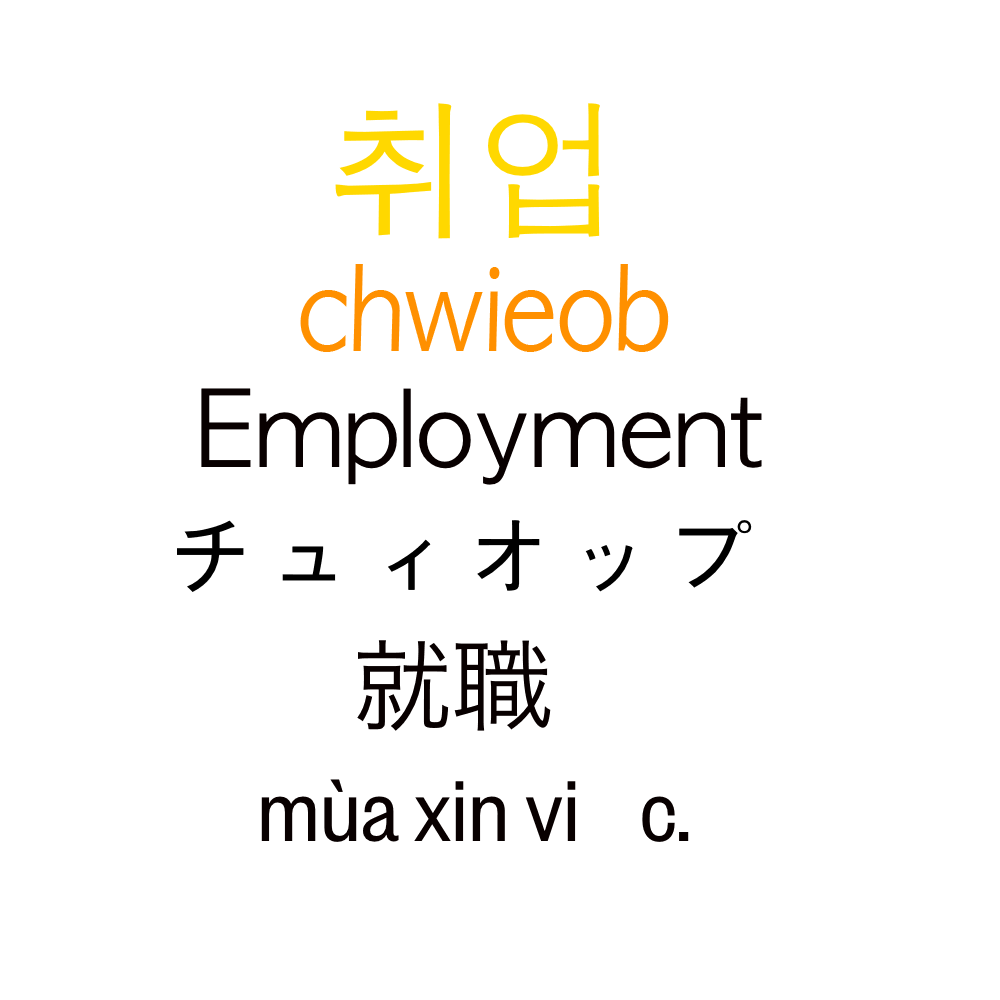
<style>
.page{position:relative;width:1000px;height:1000px;background:#ffffff}
.page>*{position:absolute;margin:0}
.t1{font:150px "AppleGothic";color:#ffd800}
.t2{font:111.2px "AppleGothic";color:#ff9000;scale:0.9 1}
.t3{font:100px "AppleGothic";color:#080000}
.t4{font:100px "AppleGothic";color:#000000}
.t5{font:100px "HiraKakuProN-W3";color:#080000}
.t6{font:100px "FoundersGroteskCond-Reg";color:#080000}
</style>
<div class="page">
<p class="t1" style="left:335px;top:103px;width:265px;height:136px">취업</p>
<p class="t2" style="left:300px;top:264px;width:369px;height:88px">chwieob</p>
<p class="t3" style="left:201px;top:388px;width:561px;height:97px">Employment</p>
<p class="t4" style="left:177px;top:520px;width:575px;height:72px">チュィオップ</p>
<p class="t5" style="left:357px;top:640px;width:194px;height:91px">就職</p>
<p class="t6" style="left:261px;top:779px;width:428px;height:63px">mùa xin việc.</p>
</div>
